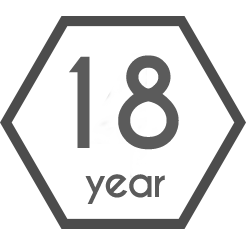
<style>
.page{position:relative;width:246px;height:246px;background:#ffffff}
.page>*{position:absolute;margin:0}
.t1{font:116.7px "CaviarDreams-Bold";letter-spacing:-0.06em;color:#333333}
.t2{font:41.7px "CaviarDreams-Bold";letter-spacing:-0.06em;color:#333333}
</style>
<div class="page">
<p class="t1" style="left:69px;top:55px;width:110px;height:95px;opacity:0.8">18</p>
<p class="t2" style="left:85px;top:174px;width:80px;height:30px;opacity:0.8">year</p>
</div>
